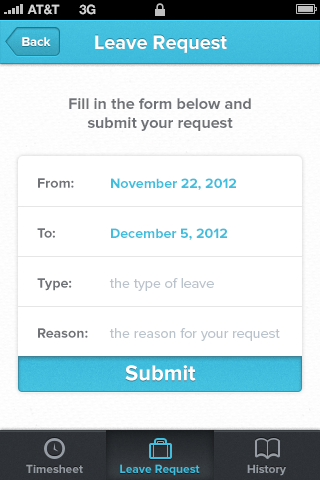
<style>
.page{position:relative;width:320px;height:480px;background:#ffffff}
.page>*{position:absolute;margin:0}
.t1{font:13px "HelveticaNeue-Bold";color:#d4d4d4;text-transform:uppercase}
.t2{font:13px "ProximaNova-Bold";color:#ffffff}
.t3{font:20px "ProximaNova-Bold";color:#ffffff}
.t4{font:16px "ProximaNova-Bold";color:#6f7276}
.t5{font:14px/25px "ProximaNova-Bold";color:#6f7276}
.t6{font:14px/50px "ProximaNova-Bold";color:#41bedd}
.t7{font:14px/50px "ProximaNova-Regular";color:#bac3cc}
.t8{font:22px "ProximaNova-Bold";color:#ffffff}
.t9{font:22px "ProximaNova-Bold"}
.t10{font:12px "ProximaNova-Bold";color:#959ca3}
.t11{font:12px "ProximaNova-Bold";color:#41bedd}
</style>
<div class="page">
<p class="t1" style="left:27px;top:4px;width:33px;height:11px">AT&amp;t</p>
<p class="t1" style="left:79px;top:4px;width:17px;height:11px">3G</p>
<p class="t2" style="left:22px;top:37px;width:29px;height:9px">Back</p>
<p class="t3" style="left:95px;top:35px;width:132px;height:18px">Leave Request</p>
<p class="t4" style="left:69px;top:98px;width:182px;height:33px;text-align:center">Fill in the form below and<br>submit your request</p>
<p class="t5" style="left:37px;top:178px;width:51px;height:160px">From:   <br><br>To:<br><br>Type:<br><br>Reason:</p>
<p class="t6" style="left:111px;top:178px;width:125px;height:62px">November 22, 2012<br>December 5, 2012</p>
<p class="t7" style="left:109px;top:278px;width:171px;height:63px">the type of leave<br>the reason for your request</p>
<p class="t8" style="left:125px;top:365px;width:71px;height:16px">Submit</p>
<p class="t9" style="left:125px;top:367px;width:71px;height:16px">Submit</p>
<p class="t10" style="left:26px;top:464px;width:57px;height:9px">Timesheet</p>
<p class="t11" style="left:120px;top:464px;width:80px;height:12px">Leave Request</p>
<p class="t11" style="left:120px;top:464px;width:80px;height:12px">Leave Request</p>
<p class="t10" style="left:247px;top:464px;width:39px;height:12px">History</p>
</div>
